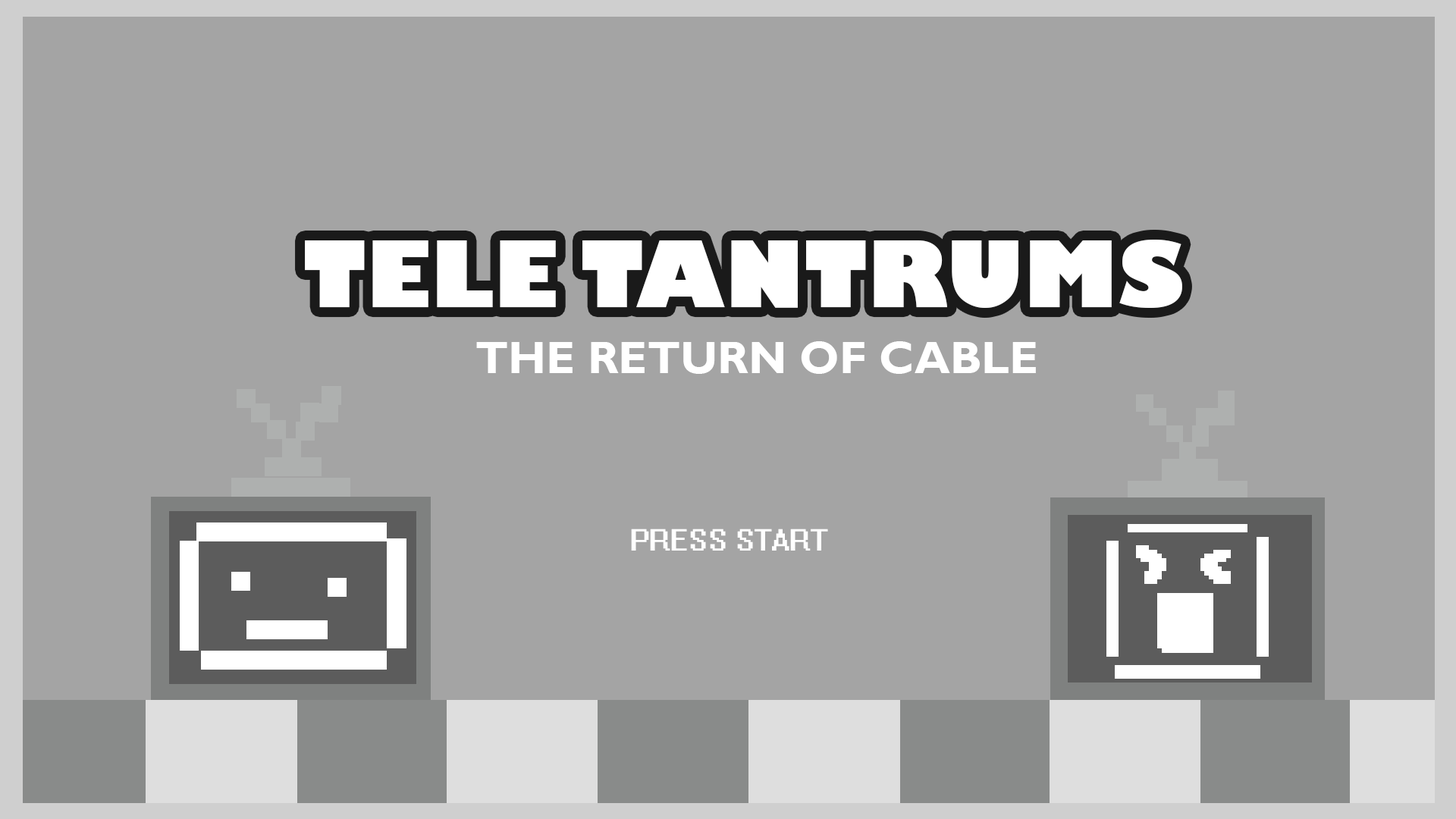
<style>
.page{position:relative;width:1456px;height:819px;background:#a4a4a4}
.page>*{position:absolute;margin:0}
.t1{font:89.8px "GillSans-UltraBold";color:#ffffff}
.t2{font:45.5px "GillSansMT-Bold";color:#ffffff;text-transform:uppercase}
.t3{font:27.3px "System";color:#ffffff;text-transform:uppercase}
</style>
<div class="page">
<p class="t1" style="left:305px;top:240px;width:877px;height:68px">TELE TANTRUMS</p>
<p class="t2" style="left:476px;top:341px;width:560px;height:33px">The Return of CABLE</p>
<p class="t3" style="left:631px;top:529px;width:197px;height:22px">Press Start</p>
</div>
